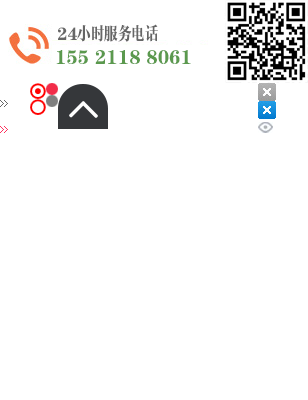
<style>
.page{position:relative;width:308px;height:400px;background:#ffffff}
.page>*{position:absolute;margin:0}
.t1{font:18px "MFJunYa_Noncommercial-Regular";color:#666666}
.t2{font:18px "FZCHYJW--GB1-0";color:#666666}
.t3{font:20px "FZCHYJW--GB1-0";color:#5b994e}
</style>
<div class="page">
<p class="t1" style="left:58px;top:24px;width:100px;height:18px"><span class="t2">24</span>小时服务电话</p>
<p class="t3" style="left:56px;top:50px;width:135px;height:14px">155 2118 8061</p>
</div>
